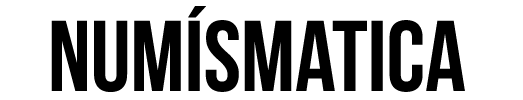
<style>
.page{position:relative;width:523px;height:100px;background:#ffffff}
.page>*{position:absolute;margin:0}
.t1{font:100px "BebasNeue";color:#000000}
</style>
<div class="page">
<p class="t1" style="left:51px;top:6px;width:414px;height:86px">NUMÍSMATICA</p>
</div>
